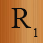
<style>
.page{position:relative;width:43px;height:43px}
.page>*{position:absolute;margin:0}
.t1{font:30px "TimesNewRomanPSMT";color:#0c0c0b}
.t2{font:12px "TimesNewRomanPSMT";color:#0c0c0b}
</style>
<div class="page">
<p class="t1" style="left:11px;top:8px;width:21px;height:20px">R</p>
<p class="t2" style="left:34px;top:28px;width:4px;height:9px">1</p>
</div>
